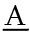
<style>
.page{position:relative;width:30px;height:35px;background:#ffffff}
.page>*{position:absolute;margin:0}
.t1{font:30px "Sylfaen";color:#000000}
</style>
<div class="page">
<p class="t1" style="left:4px;top:5px;width:22px;height:20px">A</p>
</div>
